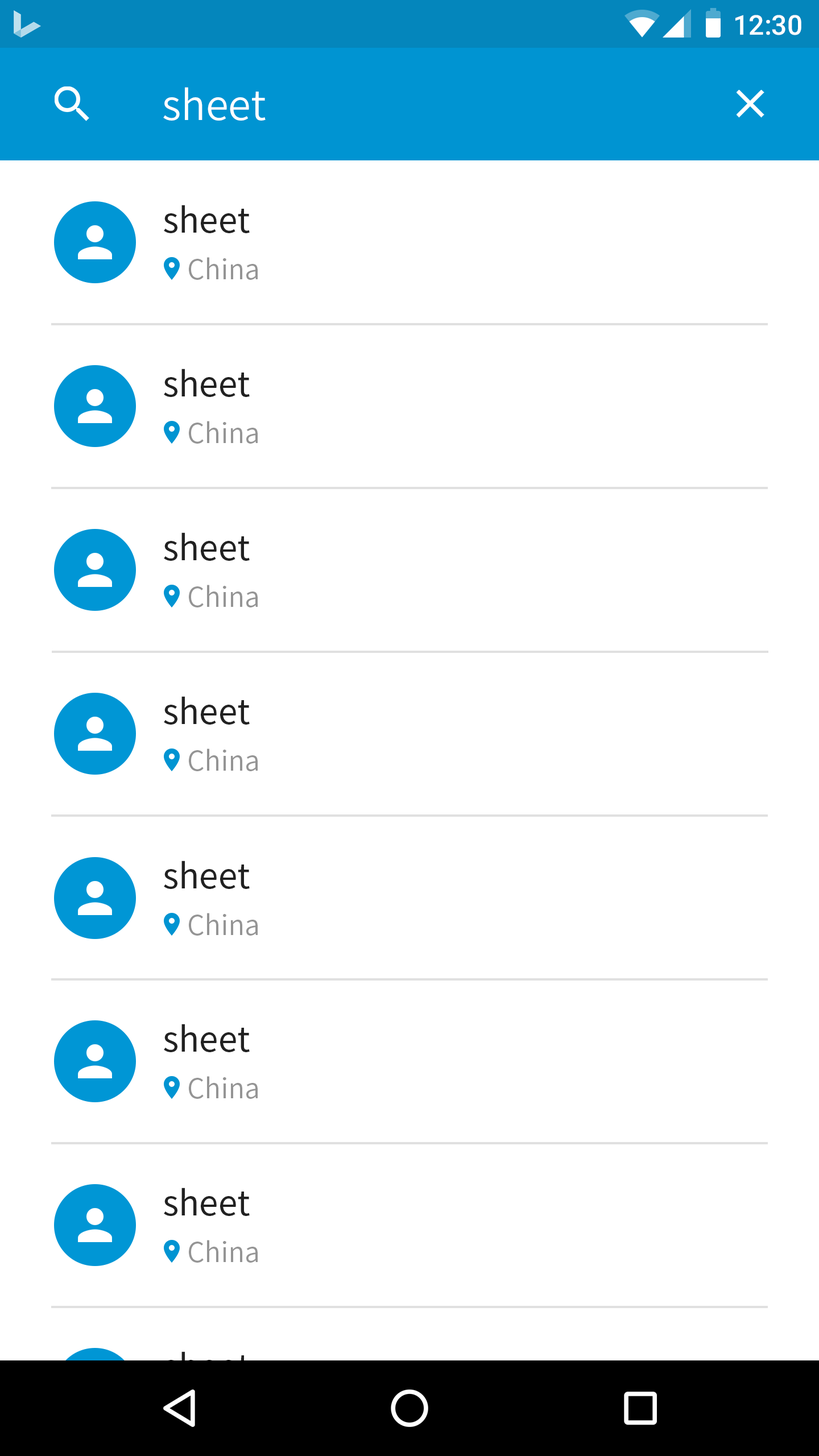
<style>
.page{position:relative;width:819px;height:1456px;background:#ffffff}
.page>*{position:absolute;margin:0}
.t1{font:27.3px "Roboto-Medium";color:#ffffff}
.t2{font:40.9px "NotoSansCJKkr-DemiLight";color:#ffffff}
.t3{font:34.1px "NotoSansCJKkr-Regular";color:#212121}
.t4{font:27.3px "NotoSansCJKkr-DemiLight";color:#949494}
.t5{font:34.1px "NotoSansCJKkr-Regular";color:#000000}
</style>
<div class="page">
<p class="t1" style="left:735px;top:15px;width:66px;height:20px">12:30</p>
<p class="t2" style="left:163px;top:87px;width:103px;height:34px">sheet</p>
<p class="t3" style="left:164px;top:205px;width:86px;height:28px">sheet</p>
<p class="t4" style="left:189px;top:257px;width:69px;height:23px">China</p>
<p class="t3" style="left:164px;top:369px;width:86px;height:28px">sheet</p>
<p class="t4" style="left:189px;top:421px;width:69px;height:23px">China</p>
<p class="t3" style="left:164px;top:532px;width:86px;height:29px">sheet</p>
<p class="t4" style="left:189px;top:585px;width:69px;height:22px">China</p>
<p class="t3" style="left:164px;top:696px;width:86px;height:29px">sheet</p>
<p class="t4" style="left:189px;top:748px;width:69px;height:23px">China</p>
<p class="t3" style="left:164px;top:861px;width:86px;height:28px">sheet</p>
<p class="t4" style="left:189px;top:913px;width:69px;height:23px">China</p>
<p class="t3" style="left:164px;top:1024px;width:86px;height:28px">sheet</p>
<p class="t4" style="left:189px;top:1076px;width:69px;height:23px">China</p>
<p class="t3" style="left:164px;top:1188px;width:86px;height:28px">sheet</p>
<p class="t4" style="left:189px;top:1240px;width:69px;height:23px">China</p>
<p class="t5" style="left:164px;top:1351px;width:86px;height:29px">sheet</p>
</div>
